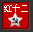
<style>
.page{position:relative;width:33px;height:32px;background:#c50000}
.page>*{position:absolute;margin:0}
.t1{font:10.4px "SimSun";letter-spacing:-0.25em;color:#ffffff}
</style>
<div class="page">
<p class="t1" style="left:4px;top:4px;width:24px;height:8px">红十二</p>
</div>
